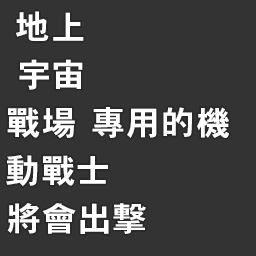
<style>
.page{position:relative;width:256px;height:256px;background:#333333}
.page>*{position:absolute;margin:0}
.t1{font:33px "HeiseiKakuGoStd-W7";letter-spacing:0.06em;color:#ffffff;scale:1.04 1}
</style>
<div class="page">
<p class="t1" style="left:16px;top:11px;width:68px;height:30px">地上</p>
<p class="t1" style="left:19px;top:59px;width:64px;height:31px">宇宙</p>
<p class="t1" style="left:7px;top:107px;width:222px;height:32px">戰場 專用的機</p>
<p class="t1" style="left:6px;top:155px;width:102px;height:31px">動戰士</p>
<p class="t1" style="left:7px;top:203px;width:139px;height:31px">將會出撃</p>
</div>
